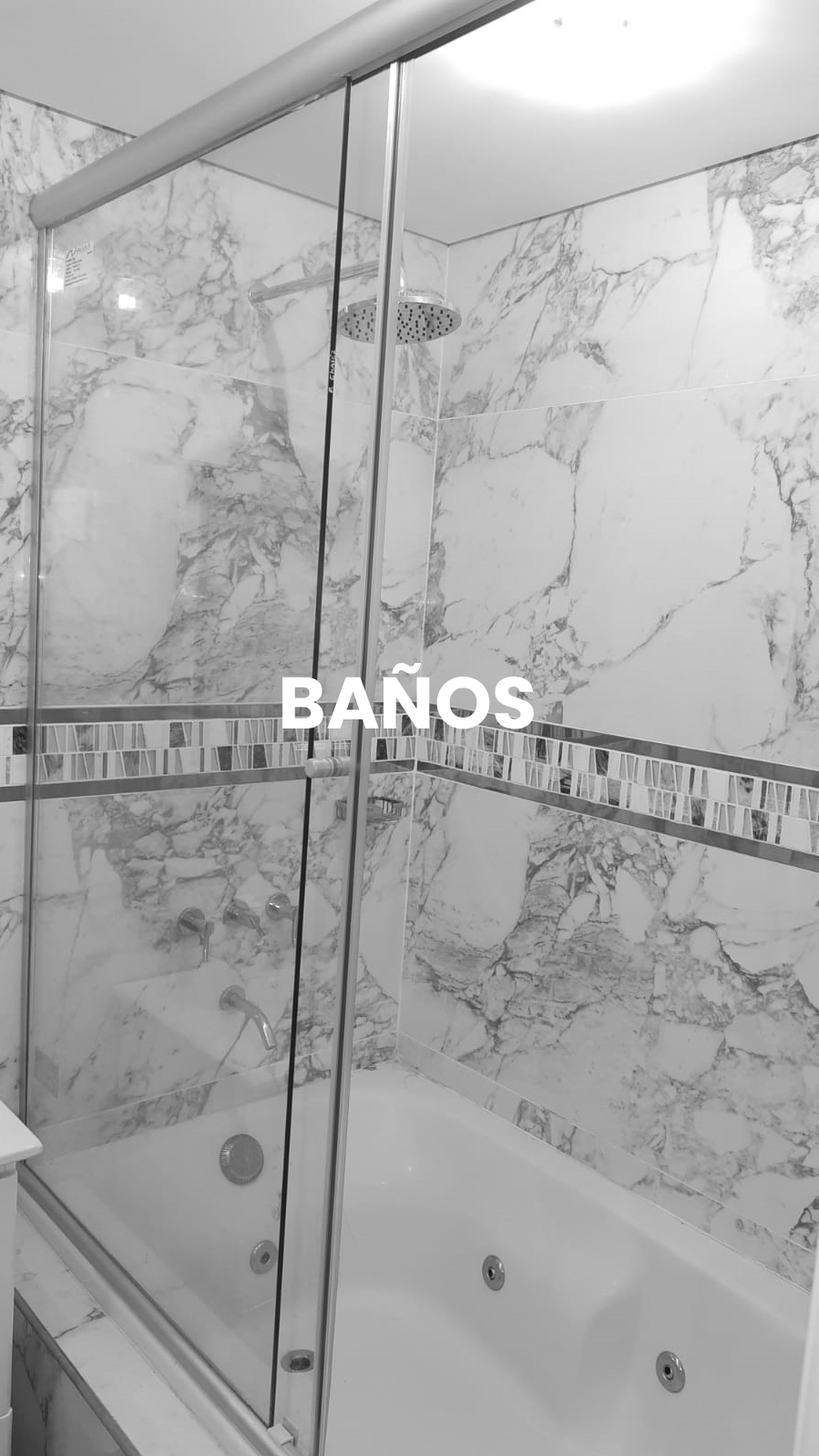
<style>
.page{position:relative;width:819px;height:1456px}
.page>*{position:absolute;margin:0}
.t1{font:72.9px "Poppins-Bold";color:#ffffff}
</style>
<div class="page">
<p class="t1" style="left:282px;top:663px;width:252px;height:67px">BAÑOS</p>
</div>
